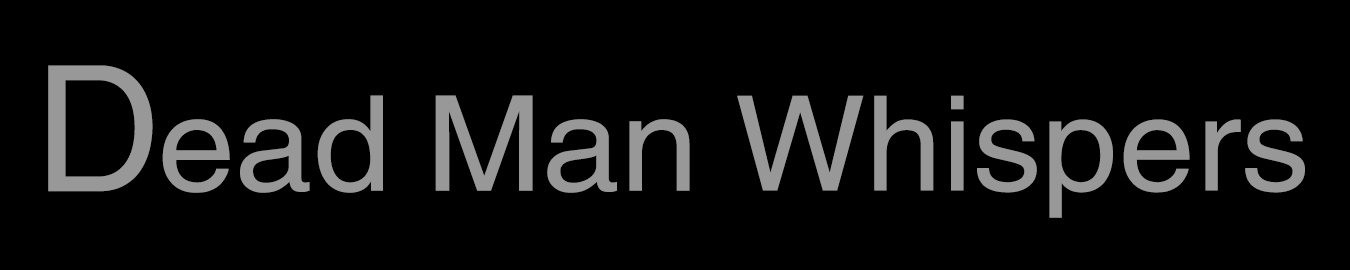
<style>
.page{position:relative;width:1350px;height:270px;background:#000000}
.page>*{position:absolute;margin:0}
.t1{font:175px "Helvetica";letter-spacing:0.005em;color:#989898}
.t2{font:132.4px "Helvetica";color:#989898;scale:1.06 1}
.t3{font:131.5px "Helvetica";color:#989898;scale:1.05 1}
.t4{font:131.5px "Helvetica";letter-spacing:0.005em;color:#989898;scale:1.05 1}
</style>
<div class="page">
<p class="t1" style="left:48px;top:65px;width:105px;height:127px">D</p>
<p class="t2" style="left:162px;top:95px;width:221px;height:98px">ead</p>
<p class="t2" style="left:435px;top:95px;width:255px;height:98px">Man</p>
<p class="t3" style="left:737px;top:95px;width:568px;height:123px"><span class="t4"> </span>Whispers</p>
</div>
